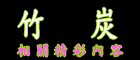
<style>
.page{position:relative;width:140px;height:60px;background:#000000}
.page>*{position:absolute;margin:0}
.t1{font:14px/36px "DFKaiShu-SB-Estd-BF";letter-spacing:0.32em;color:#fa4bec}
.t2{font:36px/36px "DFKaiShu-SB-Estd-BF";letter-spacing:0.14em;color:#ffffff;scale:0.8 1}
</style>
<div class="page">
<p class="t1" style="left:17px;top:7px;width:106px;height:50px"><span class="t2">竹  炭<br></span>相關精彩內容</p>
</div>
